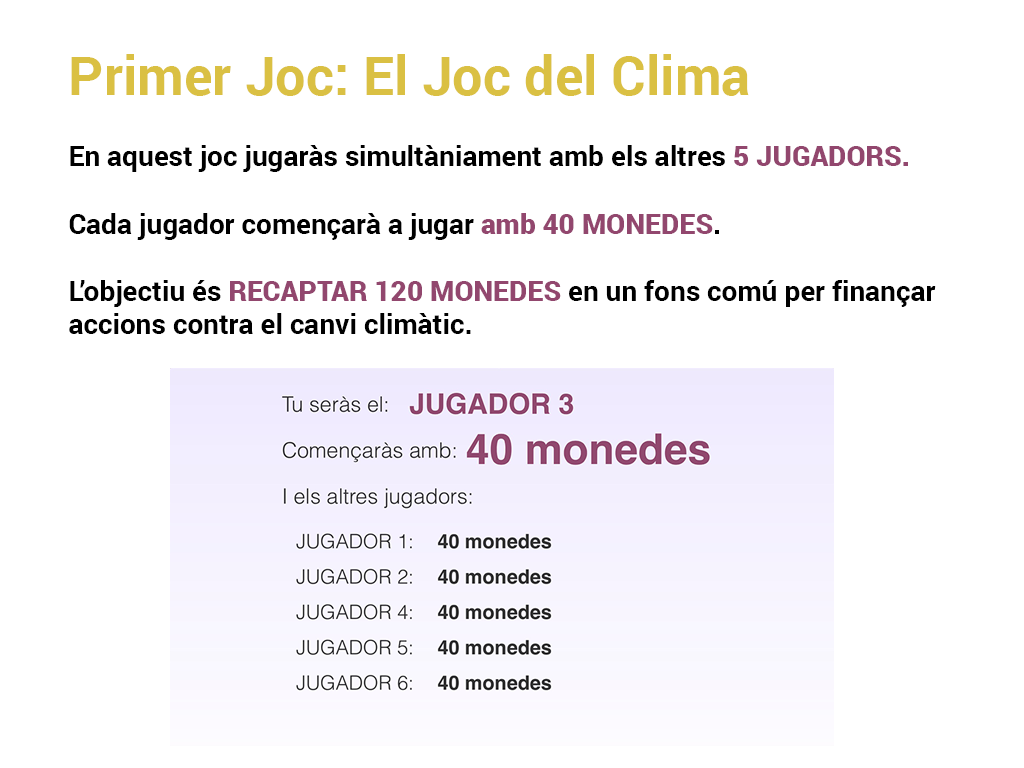
<style>
.page{position:relative;width:1024px;height:768px;background:#ffffff}
.page>*{position:absolute;margin:0}
.t1{font:54px "Roboto-Bold";color:#dac043}
.t2{font:28px "Roboto-Bold";color:#000000}
.t3{font:28px "Roboto-Black";color:#92476e}
</style>
<div class="page">
<p class="t1" style="left:71px;top:54px;width:678px;height:42px">Primer Joc: El Joc del Clima</p>
<p class="t2" style="left:69px;top:145px;width:867px;height:189px">En aquest joc jugaràs simultàniament amb els altres <span class="t3">5 JUGADORS.<br></span><br>Cada jugador començarà a jugar <span class="t3">amb 40 MONEDES</span>.<br><br>L’objectiu és <span class="t3">RECAPTAR 120 MONEDES </span>en un fons comú per finançar <br>accions contra el canvi climàtic.</p>
</div>
